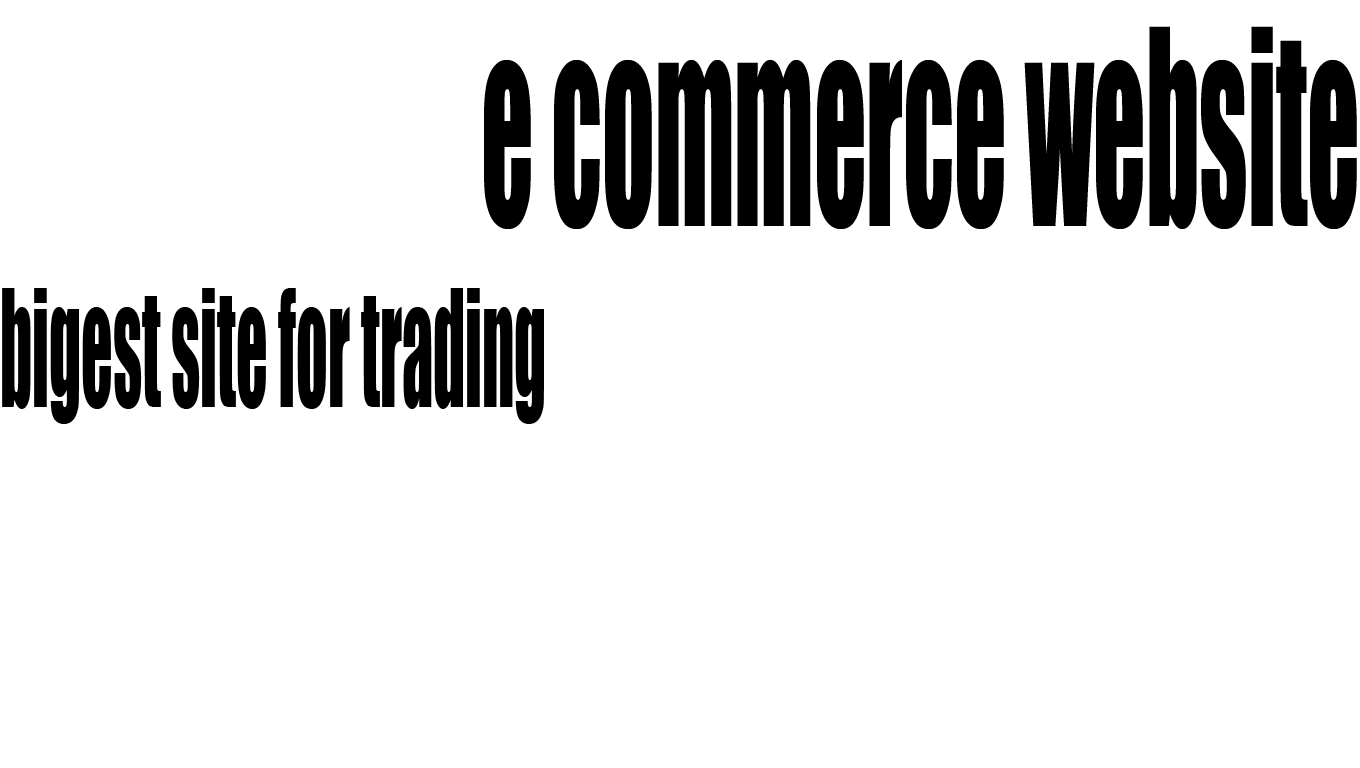
<style>
.page{position:relative;width:1360px;height:768px;background:#ffffff}
.page>*{position:absolute;margin:0}
.t1{font:151.1px "Impact";color:#000000;scale:0.41 1}
.t2{font:251.9px "Impact";color:#000000;scale:0.41 1}
</style>
<div class="page">
<p class="t1" style="left:2px;top:26px;width:1355px;height:398px;text-align:right"><span class="t2">e commerce website<br></span>bigest site for trading</p>
</div>
